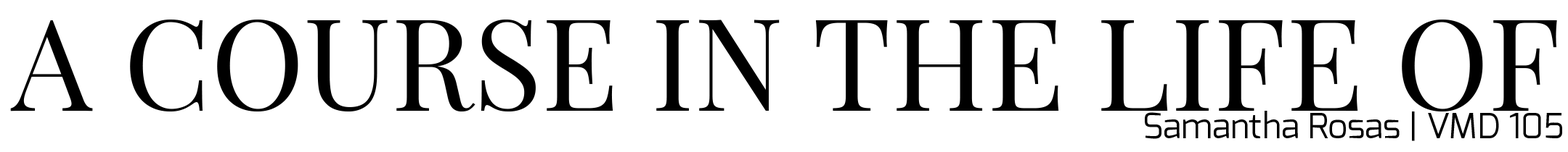
<style>
.page{position:relative;width:1568px;height:152px;background:#ffffff}
.page>*{position:absolute;margin:0}
.t1{font:127px "PlayfairDisplay-Regular";color:#000000}
.t2{font:34.8px "Exo-Regular";color:#000000}
</style>
<div class="page">
<p class="t1" style="left:10px;top:20px;width:1547px;height:92px">A COURSE IN THE LIFE OF</p>
<p class="t2" style="left:1145px;top:111px;width:417px;height:31px">Samantha Rosas | VMD 105</p>
</div>
